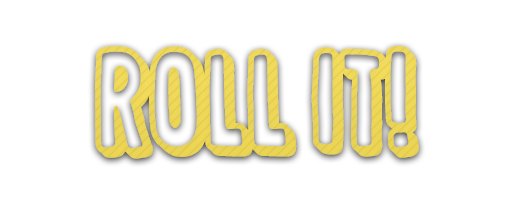
<style>
.page{position:relative;width:514px;height:205px;background:#ffffff}
.page>*{position:absolute;margin:0}
.t1{font:104.8px "SugarpunchDEMO";color:#ebd556}
</style>
<div class="page">
<p class="t1" style="left:95px;top:46px;width:324px;height:113px">roll it!</p>
</div>
